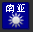
<style>
.page{position:relative;width:33px;height:32px;background:#000090}
.page>*{position:absolute;margin:0}
.t1{font:10.4px "SimSun";color:#ffffff}
</style>
<div class="page">
<p class="t1" style="left:6px;top:4px;width:19px;height:9px">南亚</p>
</div>
